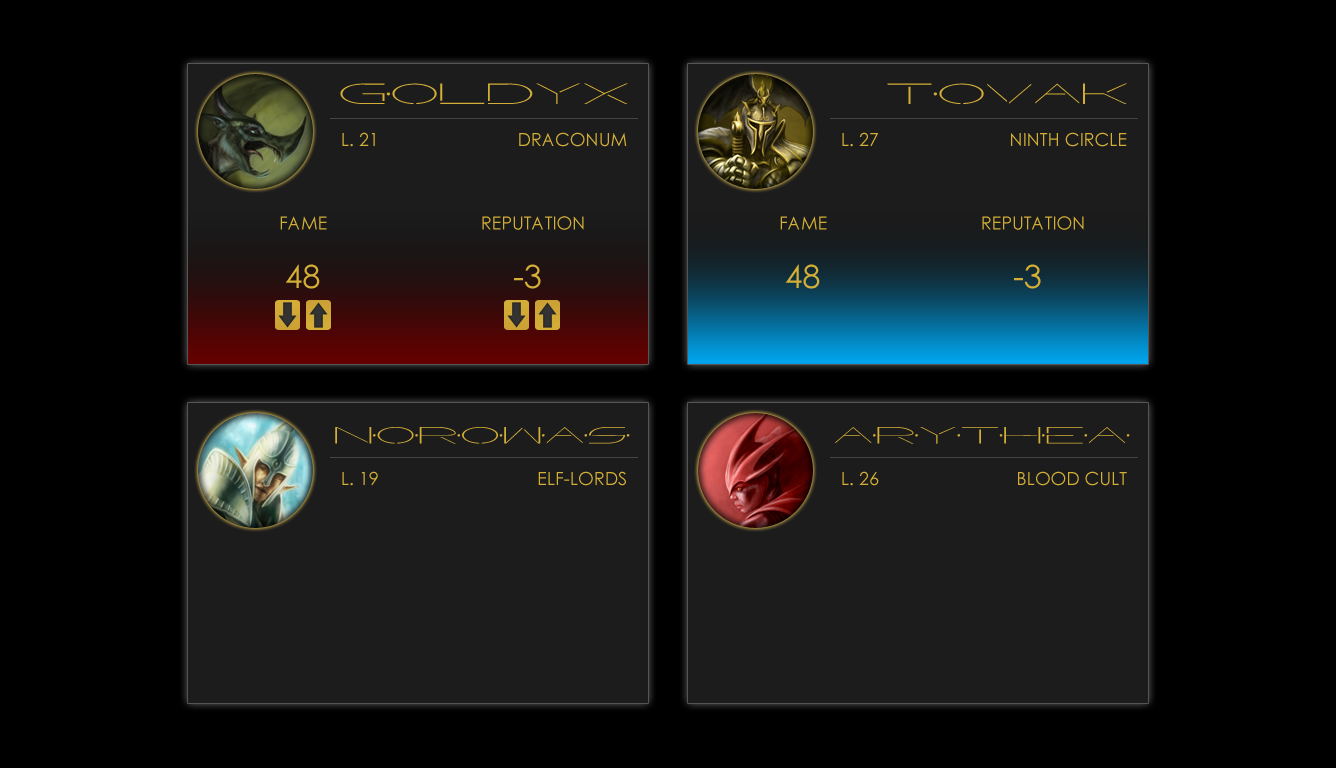
<style>
.page{position:relative;width:1336px;height:768px;background:#000000}
.page>*{position:absolute;margin:0}
.t1{font:32px "Factor";color:#d4af37}
.t2{font:18px "CenturyGothic";color:#d4af37}
.t3{font:32px "CenturyGothic";color:#d4af37}
.t4{font:26px "Factor";color:#d4af37}
</style>
<div class="page">
<p class="t1" style="left:340px;top:83px;width:288px;height:21px">Goldyx</p>
<p class="t1" style="left:887px;top:83px;width:240px;height:21px">Tovak</p>
<p class="t2" style="left:342px;top:132px;width:33px;height:15px">L. 21</p>
<p class="t2" style="left:519px;top:132px;width:108px;height:15px">DRACONUM</p>
<p class="t2" style="left:842px;top:132px;width:37px;height:15px">L. 27</p>
<p class="t2" style="left:1011px;top:132px;width:116px;height:15px">NINTH CIRCLE</p>
<p class="t2" style="left:280px;top:216px;width:47px;height:14px">FAME</p>
<p class="t2" style="left:482px;top:216px;width:102px;height:14px">REPUTATION</p>
<p class="t2" style="left:780px;top:216px;width:47px;height:14px">FAME</p>
<p class="t2" style="left:982px;top:216px;width:102px;height:14px">REPUTATION</p>
<p class="t3" style="left:285px;top:264px;width:35px;height:25px">48</p>
<p class="t3" style="left:514px;top:264px;width:27px;height:25px">-3</p>
<p class="t3" style="left:785px;top:264px;width:35px;height:25px">48</p>
<p class="t3" style="left:1014px;top:264px;width:27px;height:25px">-3</p>
<p class="t4" style="left:335px;top:427px;width:295px;height:17px">NOROWAS</p>
<p class="t4" style="left:835px;top:427px;width:295px;height:17px">ARYTHEA</p>
<p class="t2" style="left:342px;top:471px;width:36px;height:15px">L. 19</p>
<p class="t2" style="left:538px;top:471px;width:88px;height:15px">ELF-LORDS</p>
<p class="t2" style="left:842px;top:471px;width:37px;height:15px">L. 26</p>
<p class="t2" style="left:1018px;top:471px;width:109px;height:15px">BLOOD CULT</p>
</div>
